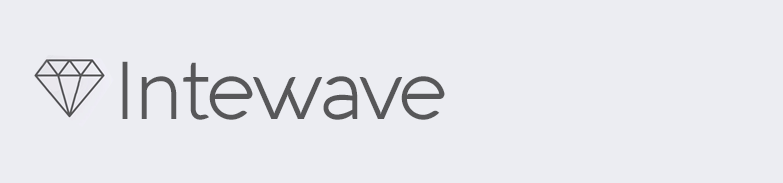
<style>
.page{position:relative;width:783px;height:183px;background:#ecedf2}
.page>*{position:absolute;margin:0}
.t1{font:80px "Aquawax-Light";color:#575759}
</style>
<div class="page">
<p class="t1" style="left:122px;top:61px;width:323px;height:59px">Intewave</p>
</div>
